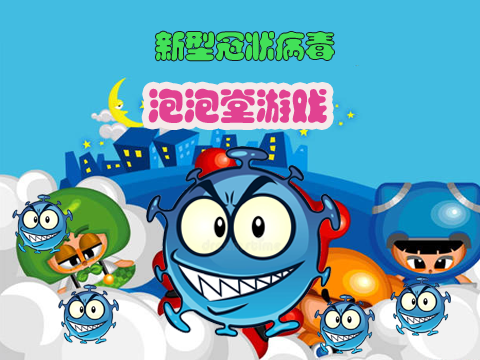
<style>
.page{position:relative;width:480px;height:360px;background:#42bce1}
.page>*{position:absolute;margin:0}
.t1{font:30px "JPTY";color:#42e158}
.t2{font:36px "JPTY";color:#e14291}
</style>
<div class="page">
<p class="t1" style="left:155px;top:31px;width:179px;height:30px">新型冠状病毒</p>
<p class="t2" style="left:148px;top:88px;width:179px;height:35px">泡泡堂游戏</p>
</div>
